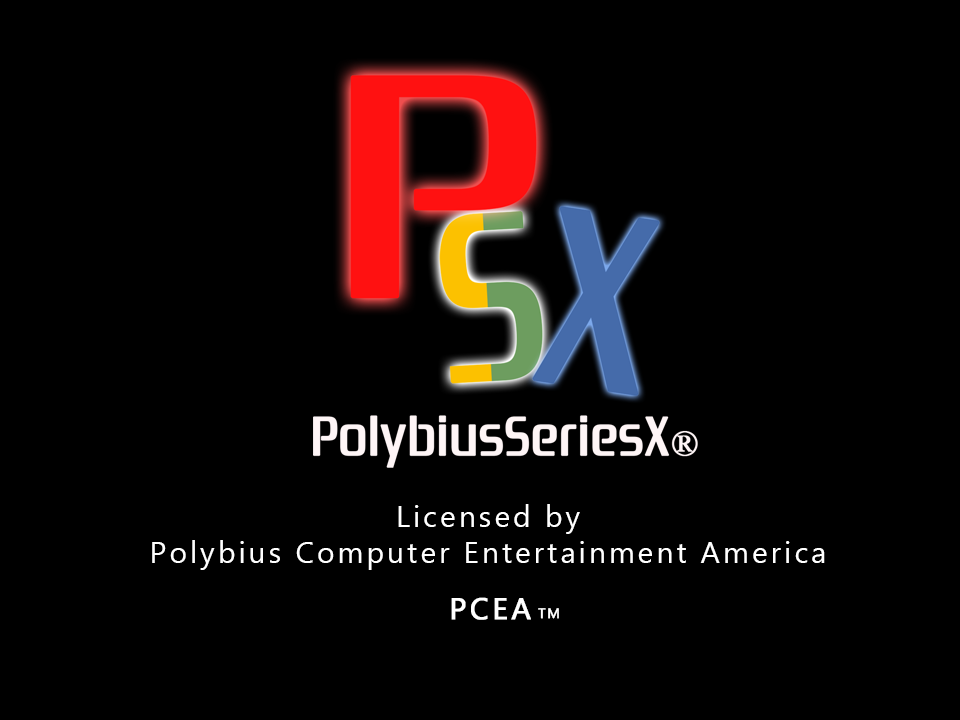
<style>
.page{position:relative;width:960px;height:720px;background:#000000}
.page>*{position:absolute;margin:0}
.t1{font:30px "Gadugi";letter-spacing:0.1em;color:#ffffff}
.t2{font:30px "Gadugi";letter-spacing:0.1em;color:#ffffff;font-weight:bold}
.t3{font:14px "Gadugi";letter-spacing:0.1em;color:#ffffff;font-weight:bold}
</style>
<div class="page">
<p class="t1" style="left:152px;top:504px;width:673px;height:66px;text-align:center">Licensed by<br>Polybius Computer Entertainment America</p>
<p class="t2" style="left:451px;top:597px;width:80px;height:23px">PCEA</p>
<p class="t3" style="left:538px;top:608px;width:21px;height:11px">TM</p>
</div>
